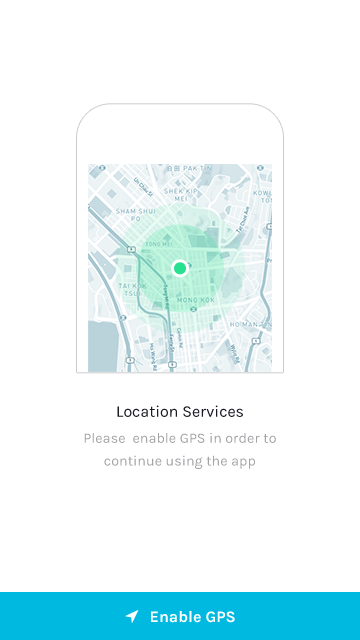
<style>
.page{position:relative;width:360px;height:640px;background:#ffffff}
.page>*{position:absolute;margin:0}
.t1{font:16.1px "Karla-Regular";color:#1b1b24}
.t2{font:14.1px/23px "Karla-Regular";color:#a4a4a7}
.t3{font:16px "Karla-Bold";color:#ffffff}
</style>
<div class="page">
<p class="t1" style="left:117px;top:405px;width:126px;height:12px">Location Services</p>
<p class="t2" style="left:84px;top:433px;width:192px;height:36px;text-align:center">Please  enable GPS in order to<br>continue using the app</p>
<p class="t3" style="left:151px;top:611px;width:84px;height:12px">Enable GPS</p>
</div>
